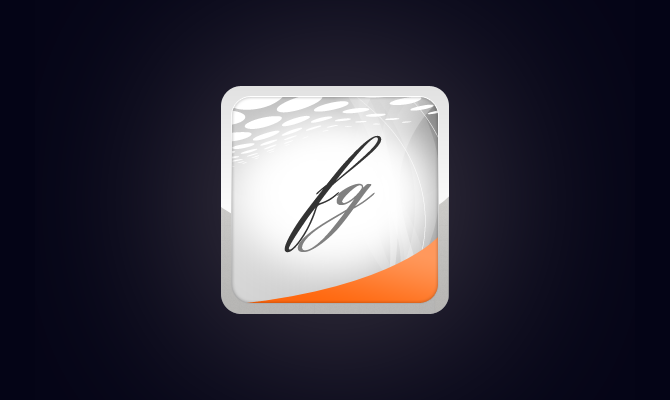
<style>
.page{position:relative;width:670px;height:400px}
.page>*{position:absolute;margin:0}
.t1{font:120px "BickhamScriptPro-Regular";letter-spacing:0.02em;color:#333333}
.t2{font:120px "BickhamScriptPro-Regular";letter-spacing:0.02em;color:#808080}
</style>
<div class="page">
<p class="t1" style="left:284px;top:135px;width:98px;height:118px">f<span class="t2">g</span></p>
</div>
